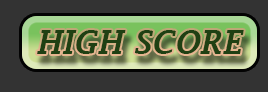
<style>
.page{position:relative;width:268px;height:92px;background:#333333}
.page>*{position:absolute;margin:0}
.t1{font:33.3px "LucidaFax-DemiItalic";color:#1f4013;scale:0.94 1}
</style>
<div class="page">
<p class="t1" style="left:37px;top:30px;width:207px;height:24px">HIGH SCORE</p>
</div>
